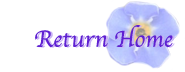
<style>
.page{position:relative;width:185px;height:72px;background:#ffffff}
.page>*{position:absolute;margin:0}
.t1{font:24px "Apple-Chancery";color:#5f21d2}
</style>
<div class="page">
<p class="t1" style="left:35px;top:25px;width:138px;height:23px">Return Home</p>
</div>
